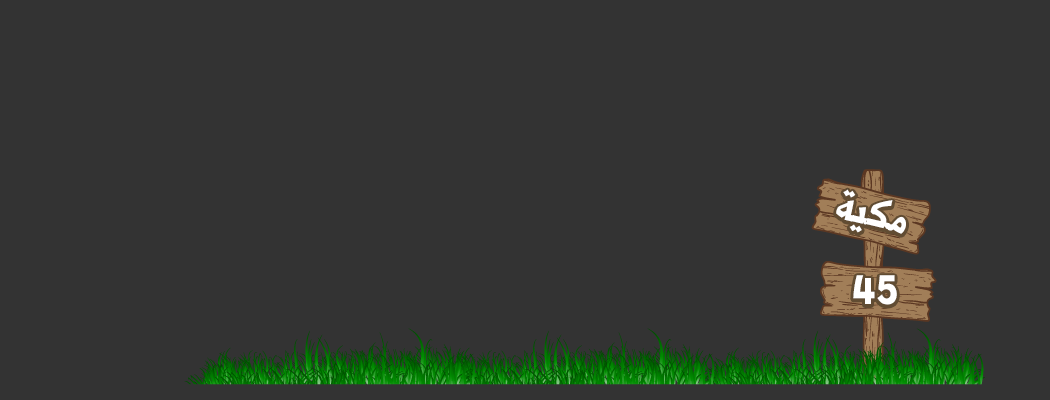
<style>
.page{position:relative;width:1050px;height:400px;background:#333333}
.page>*{position:absolute;margin:0}
.t1{font:48px "Shorooq_N1";color:#ffffff}
.t2{font:60px "Shorooq_N1";color:#ffffff}
</style>
<div class="page">
<p class="t1" style="left:836px;top:189px;width:70px;height:45px;rotate:13deg">مكية</p>
<p class="t2" style="left:853px;top:275px;width:44px;height:30px">45</p>
</div>
